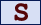
<style>
.page{position:relative;width:41px;height:25px;background:#d7dff4}
.page>*{position:absolute;margin:0}
.t1{font:28px "CourierNewPS-BoldMT";color:#540608}
</style>
<div class="page">
<p class="t1" style="left:14px;top:3px;width:14px;height:18px">S</p>
</div>
